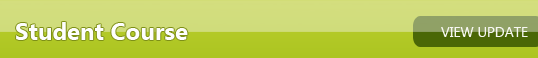
<style>
.page{position:relative;width:538px;height:58px}
.page>*{position:absolute;margin:0}
.t1{font:24px "SegoeUI-Bold";color:#fefefe}
.t2{font:14px "SegoeUI";color:#f6f7f1}
</style>
<div class="page">
<p class="t1" style="left:16px;top:22px;width:172px;height:18px">Student Course</p>
<p class="t2" style="left:441px;top:27px;width:87px;height:10px">VIEW UPDATE</p>
</div>
